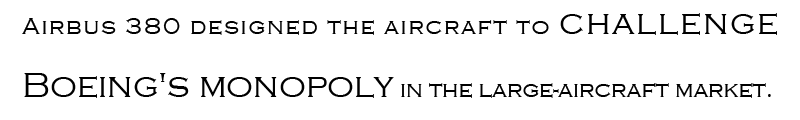
<style>
.page{position:relative;width:800px;height:120px;background:#ffffff}
.page>*{position:absolute;margin:0}
.t1{font:24px "CopperplateGothic-Light";color:#000000}
.t2{font:36px "CopperplateGothic-Light";color:#000000}
</style>
<div class="page">
<p class="t1" style="left:22px;top:13px;width:755px;height:85px;text-align:justify">Airbus 380 designed the aircraft to <span class="t2">challenge Boeing's monopoly</span> in the large-aircraft market.</p>
</div>
